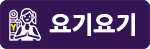
<style>
.page{position:relative;width:150px;height:49px;background:#341553}
.page>*{position:absolute;margin:0}
.t1{font:23.5px "NanumGothicExtraBold";color:#ffffff}
.t2{font:7.9px "NanumGothicExtraBold";letter-spacing:0.04em;color:#ffff00}
</style>
<div class="page">
<p class="t1" style="left:49px;top:13px;width:86px;height:23px">요기요기</p>
<p class="t2" style="left:10px;top:24px;width:7px;height:7px">Y</p>
</div>
